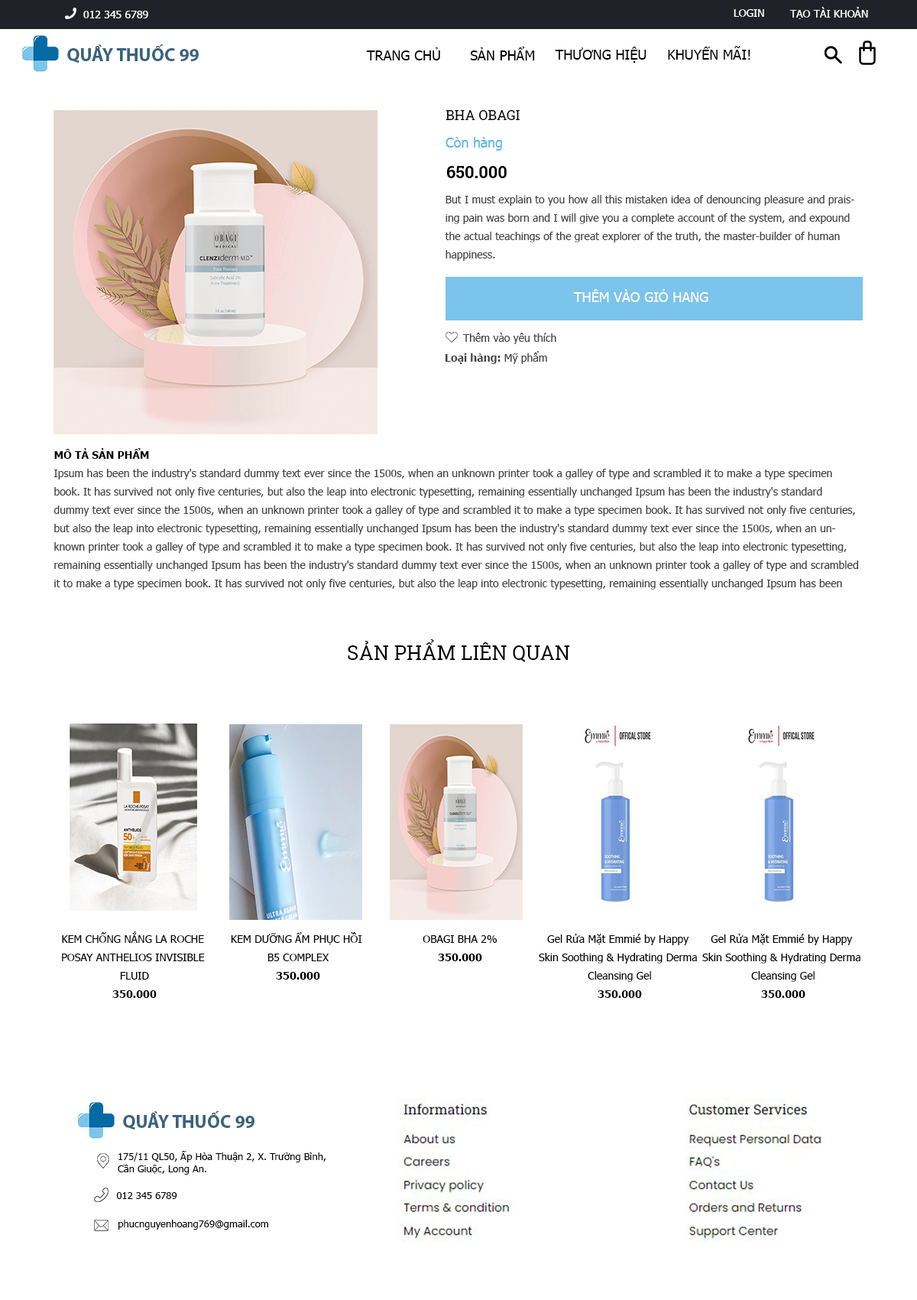
<style>
.page{position:relative;width:917px;height:1300px;background:#ffffff}
.page>*{position:absolute;margin:0}
.t1{font:10.7px "Tahoma";color:#ffffff}
.t2{font:18.3px "MyriadPro-Bold";color:#3a637f}
.t3{font:13.8px "Tahoma";color:#000000}
.t4{font:13.8px "RobotoSlab-Regular";color:#000000}
.t5{font:13.8px "Tahoma";color:#58b6e9}
.t6{font:16.8px "RobotoSlab-Bold";color:#000000}
.t7{font:10.7px/18.3px "Tahoma";color:#424242}
.t8{font:13.8px "Tahoma";color:#ffffff}
.t9{font:10.7px "Tahoma";color:#424242}
.t10{font:10.7px "Tahoma-Bold";color:#424242}
.t11{font:10.7px/18.3px "Tahoma-Bold";color:#000000}
.t12{font:19.9px "RobotoSlab-Regular";color:#000000}
.t13{font:10.7px/18.3px "Tahoma";color:#000000}
.t14{font:9.9px "Tahoma";color:#000000}
</style>
<div class="page">
<p class="t1" style="left:83px;top:11px;width:65px;height:7px">012 345 6789</p>
<p class="t1" style="left:734px;top:9px;width:31px;height:8px">LOGIN</p>
<p class="t1" style="left:790px;top:7px;width:79px;height:12px">TẠO TÀI KHOẢN</p>
<p class="t2" style="left:67px;top:44px;width:132px;height:19px">QUẦY THUỐC 99</p>
<p class="t3" style="left:366px;top:47px;width:74px;height:13px">TRANG CHỦ</p>
<p class="t3" style="left:470px;top:47px;width:65px;height:13px">SẢN PHẨM</p>
<p class="t3" style="left:555px;top:47px;width:92px;height:16px">THƯƠNG HIỆU</p>
<p class="t3" style="left:668px;top:46px;width:83px;height:14px">KHUYẾN MÃI!</p>
<p class="t4" style="left:446px;top:110px;width:74px;height:10px">BHA OBAGI</p>
<p class="t5" style="left:446px;top:137px;width:56px;height:14px">Còn hàng</p>
<p class="t6" style="left:447px;top:166px;width:60px;height:12px">650.000</p>
<p class="t7" style="left:445px;top:195px;width:410px;height:66px">But I must explain to you how all this mistaken idea of denouncing pleasure and praising pain was born and I will give you a complete account of the system, and expound the actual teachings of the great explorer of the truth, the master-builder of human happiness.</p>
<p class="t8" style="left:573px;top:289px;width:136px;height:13px">THÊM VÀO GIỎ HANG</p>
<p class="t9" style="left:463px;top:333px;width:94px;height:11px">Thêm vào yêu thích</p>
<p class="t10" style="left:446px;top:351px;width:101px;height:13px">Loại hàng: <span class="t9">Mỹ phẩm</span></p>
<p class="t7" style="left:54px;top:448px;width:805px;height:141px"><span class="t11">MÔ TẢ SẢN PHẨM<br></span>Ipsum has been the industry's standard dummy text ever since the 1500s, when an unknown printer took a galley of type and scrambled it to make a type specimen book. It has survived not only five centuries, but also the leap into electronic typesetting, remaining essentially unchanged Ipsum has been the industry's standard dummy text ever since the 1500s, when an unknown printer took a galley of type and scrambled it to make a type specimen book. It has survived not only five centuries, but also the leap into electronic typesetting, remaining essentially unchanged Ipsum has been the industry's standard dummy text ever since the 1500s, when an unknown printer took a galley of type and scrambled it to make a type specimen book. It has survived not only five centuries, but also the leap into electronic typesetting, remaining essentially unchanged Ipsum has been the industry's standard dummy text ever since the 1500s, when an unknown printer took a galley of type and scrambled it to make a type specimen book. It has survived not only five centuries, but also the leap into electronic typesetting, remaining essentially unchanged Ipsum has been the industry's standard dummy text ever since the 1500s, when an unknown printer took a galley of type and scrambled it to make a type specimen book. It has survived not only five centuries, but also the leap into electronic typesetting, remaining essentially unchanged</p>
<p class="t12" style="left:348px;top:639px;width:222px;height:23px">SẢN PHẨM LIÊN QUAN</p>
<p class="t13" style="left:62px;top:931px;width:143px;height:67px;text-align:center">KEM CHỐNG NẮNG LA ROCHE <br>POSAY ANTHELIOS INVISIBLE <br>FLUID<br><span class="t11">350.000</span></p>
<p class="t13" style="left:231px;top:932px;width:131px;height:47px;text-align:center">KEM DƯỠNG ẨM PHỤC HỒI <br>B5 COMPLEX<br><span class="t11">350.000</span></p>
<p class="t13" style="left:423px;top:935px;width:75px;height:26px;text-align:center">OBAGI BHA 2%<br><span class="t11">350.000</span></p>
<p class="t13" style="left:539px;top:934px;width:158px;height:64px;text-align:center">Gel Rửa Mặt Emmié by Happy <br>Skin Soothing &amp; Hydrating Derma <br>Cleansing Gel<br><span class="t11">350.000</span></p>
<p class="t13" style="left:703px;top:934px;width:158px;height:64px;text-align:center">Gel Rửa Mặt Emmié by Happy <br>Skin Soothing &amp; Hydrating Derma <br>Cleansing Gel<br><span class="t11">350.000</span></p>
<p class="t2" style="left:123px;top:1111px;width:132px;height:19px">QUẦY THUỐC 99</p>
<p class="t14" style="left:118px;top:1151px;width:208px;height:23px">175/11 QL50, Ấp Hòa Thuận 2, X. Trường Bình, <br>Cần Giuộc, Long An.</p>
<p class="t14" style="left:116px;top:1192px;width:61px;height:7px">012 345 6789</p>
<p class="t14" style="left:119px;top:1219px;width:149px;height:10px">phucnguyenhoang769@gmail.com</p>
</div>
